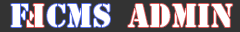
<style>
.page{position:relative;width:240px;height:32px;background:#333333}
.page>*{position:absolute;margin:0}
.t1{font:30px "StencilStd";color:#ffffff}
</style>
<div class="page">
<p class="t1" style="left:11px;top:4px;width:17px;height:23px">F</p>
<p class="t1" style="left:27px;top:4px;width:17px;height:23px;rotate:180deg">F</p>
<p class="t1" style="left:47px;top:4px;width:63px;height:23px">CMS</p>
<p class="t1" style="left:128px;top:4px;width:105px;height:23px">admin</p>
</div>
